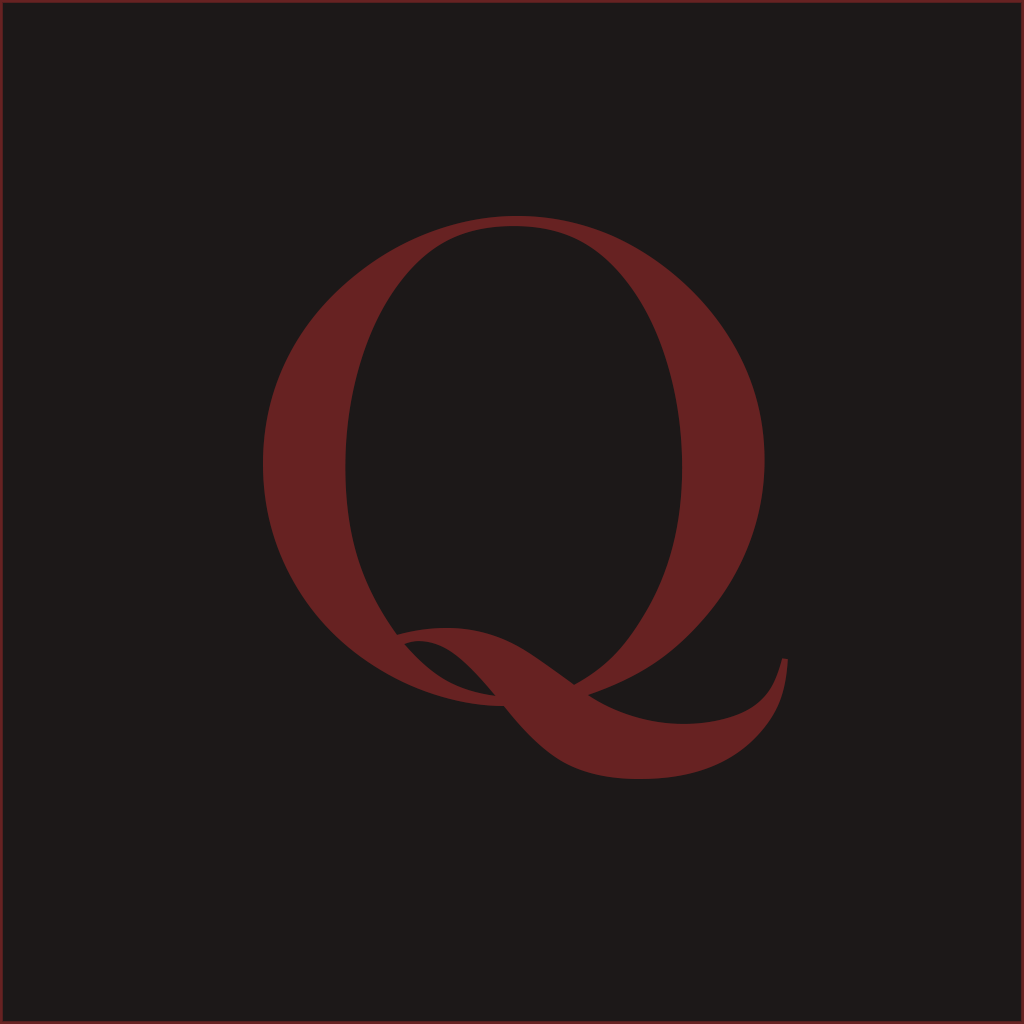
<style>
.page{position:relative;width:1024px;height:1024px;background:#1c1818}
.page>*{position:absolute;margin:0}
.t1{font:700px "BaskOldFace";color:#672222}
</style>
<div class="page">
<p class="t1" style="left:263px;top:215px;width:525px;height:564px">Q</p>
</div>
